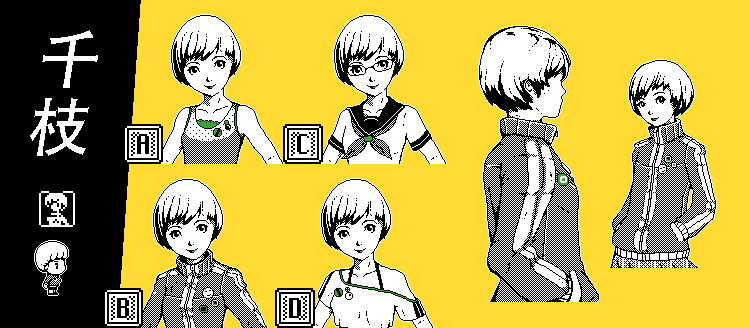
<style>
.page{position:relative;width:750px;height:328px;background:#ffdb34}
.page>*{position:absolute;margin:0}
.t1{font:64px/80px "AdobeHeitiStd-Regular";letter-spacing:0.1em;color:#ffffff}
</style>
<div class="page">
<p class="t1" style="left:30px;top:30px;width:68px;height:126px">千枝</p>
</div>
